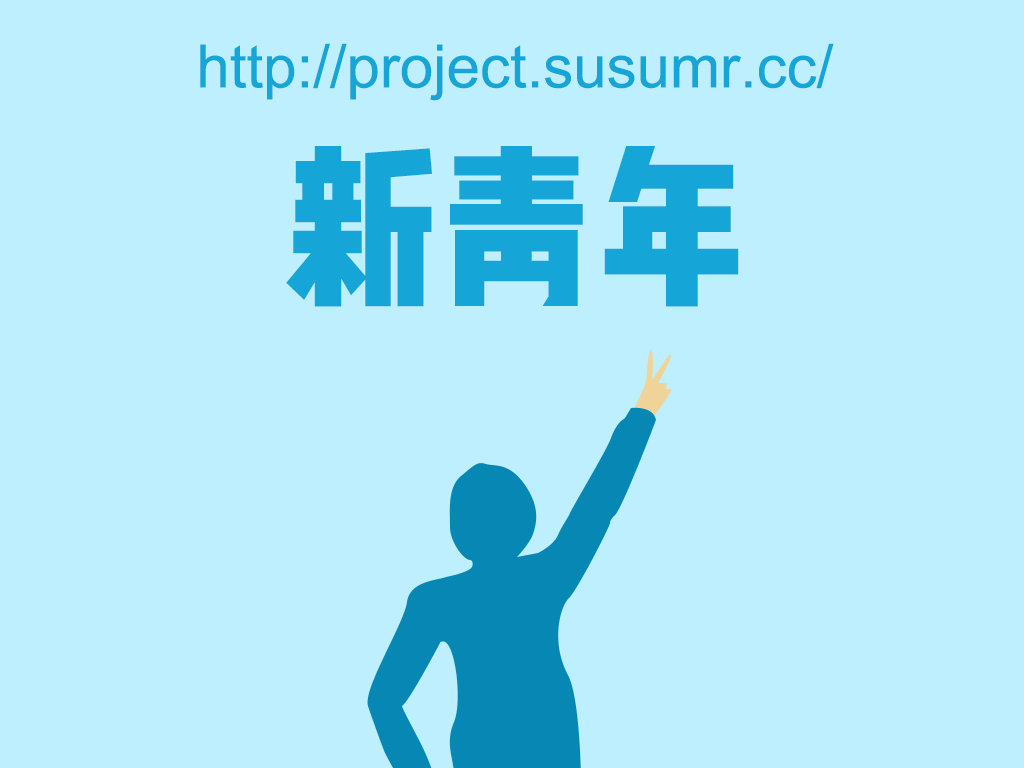
<style>
.page{position:relative;width:1024px;height:768px;background:#bdefff}
.page>*{position:absolute;margin:0}
.t1{font:60px "ArialMT";color:#15a6d7}
.t2{font:180px "WenYue-XinQingNianTi-NC-W8";color:#15a6d7}
</style>
<div class="page">
<p class="t1" style="left:200px;top:43px;width:634px;height:58px">http://project.susumr.cc/</p>
<p class="t2" style="left:286px;top:146px;width:453px;height:161px">新青年</p>
</div>
